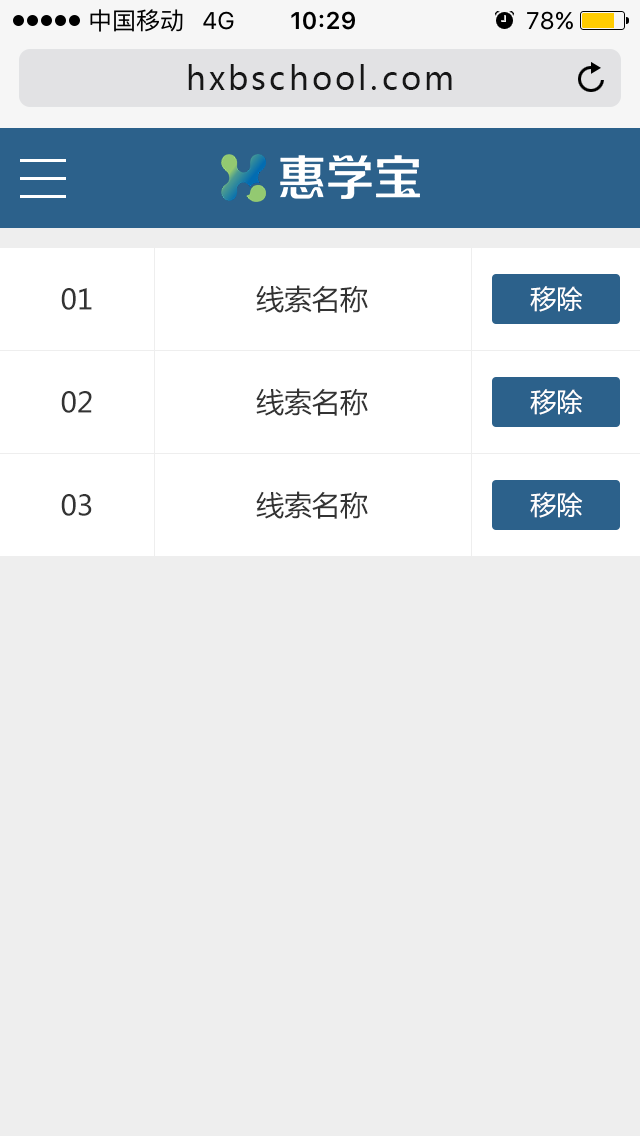
<style>
.page{position:relative;width:640px;height:1136px;background:#eeeeee}
.page>*{position:absolute;margin:0}
.t1{font:32px "MicrosoftYaHei";letter-spacing:0.1em;color:#171717}
.t2{font:28px "MicrosoftYaHei";color:#333333}
.t3{font:26px "MicrosoftYaHei";color:#ffffff}
</style>
<div class="page">
<p class="t1" style="left:188px;top:64px;width:264px;height:26px">hxbschool.com</p>
<p class="t2" style="left:61px;top:288px;width:31px;height:22px">01</p>
<p class="t2" style="left:256px;top:285px;width:112px;height:28px">线索名称</p>
<p class="t3" style="left:530px;top:286px;width:53px;height:26px">移除</p>
<p class="t2" style="left:256px;top:388px;width:112px;height:28px">线索名称</p>
<p class="t3" style="left:530px;top:389px;width:53px;height:26px">移除</p>
<p class="t2" style="left:61px;top:391px;width:31px;height:22px">02</p>
<p class="t2" style="left:61px;top:494px;width:31px;height:22px">03</p>
<p class="t2" style="left:256px;top:491px;width:112px;height:28px">线索名称</p>
<p class="t3" style="left:530px;top:492px;width:53px;height:26px">移除</p>
</div>
